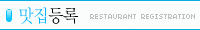
<style>
.page{position:relative;width:200px;height:30px;background:#fbfdfc}
.page>*{position:absolute;margin:0}
.t1{font:18px "YDI-WebM";letter-spacing:-0.075em;color:#00b1ff;scale:0.9 1}
.t2{font:24px "¼Û¼ºÈÆ-½ÅÇüÅ¸ÀÚÃ¼";letter-spacing:-0.075em;color:#04ace0;scale:0.9 1}
.t3{font:18px "YDI-WebM";letter-spacing:-0.075em;color:#000000;scale:0.9 1}
.t4{font:8px "04b03";color:#bcbebf}
</style>
<div class="page">
<p class="t1" style="left:19px;top:7px;width:59px;height:17px"><span class="t2"> </span>맛집<span class="t3">등록</span></p>
<p class="t4" style="left:90px;top:14px;width:105px;height:5px">RESTAURANT REGISTRATION</p>
</div>
